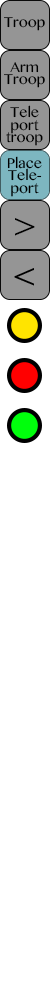
<style>
.page{position:relative;width:50px;height:1000px;background:#ffffff}
.page>*{position:absolute;margin:0}
.t1{font:12.5px "BanglaMN";color:#000000}
.t2{font:12.5px/12.5px "BanglaMN";color:#000000}
.t3{font:33.4px "BanglaMN";color:#000000}
</style>
<div class="page">
<p class="t1" style="left:4px;top:17px;width:41px;height:14px">Trooper</p>
<p class="t2" style="left:4px;top:62px;width:41px;height:26px;text-align:center">Arm<br>Troop</p>
<p class="t2" style="left:6px;top:105px;width:37px;height:41px;text-align:center">Tele<br>port<br>troop</p>
<p class="t2" style="left:7px;top:156px;width:35px;height:41px;text-align:center">Place<br>Teleport</p>
<p class="t3" style="left:15px;top:218px;width:20px;height:18px">&gt;</p>
</div>
